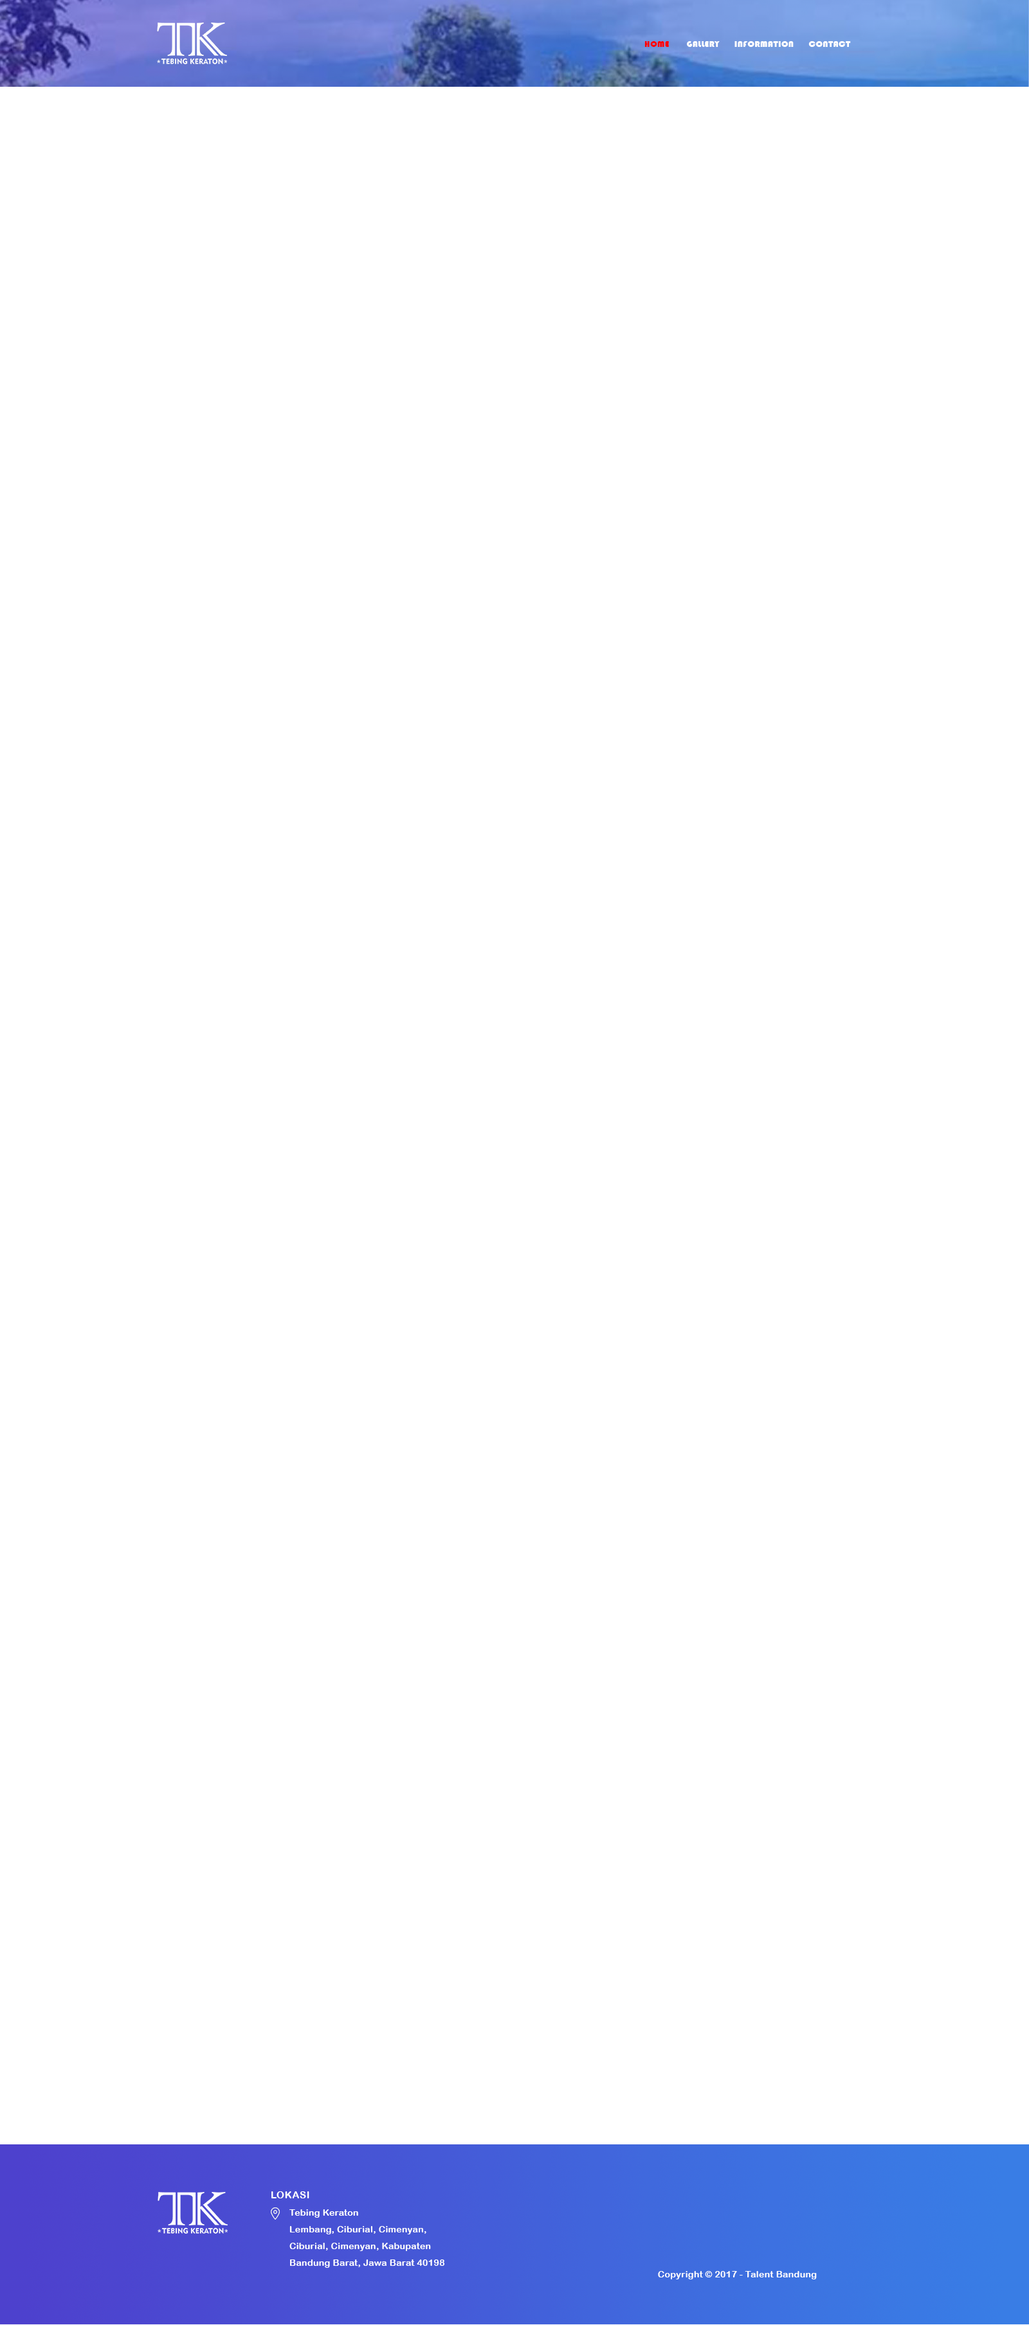
<style>
.page{position:relative;width:1029px;height:2325px;background:#ffffff}
.page>*{position:absolute;margin:0}
.t1{font:9px "Bauhaus93";letter-spacing:0.025em;color:#ffffff}
.t2{font:9px "Bauhaus93";letter-spacing:0.025em;color:#ff0000}
.t3{font:9.6px "ArialRoundedMTBold";letter-spacing:0.05em;color:#ffffff}
.t4{font:9px/16.7px "ArialRoundedMTBold";letter-spacing:0.025em;color:#ffffff}
.t5{font:9px "ArialRoundedMTBold";letter-spacing:0.025em;color:#ffffff}
</style>
<div class="page">
<p class="t1" style="left:644px;top:41px;width:207px;height:6px"><span class="t2">HOME</span>       GALLERY      INFORMATION      CONTACT</p>
<p class="t3" style="left:271px;top:2192px;width:38px;height:7px">LOKASI</p>
<p class="t4" style="left:289px;top:2210px;width:155px;height:58px">Tebing Keraton<br>Lembang, Ciburial, Cimenyan, Ciburial, Cimenyan, Kabupaten Bandung Barat, Jawa Barat 40198</p>
<p class="t5" style="left:658px;top:2271px;width:158px;height:9px">Copyright © 2017 - Talent Bandung</p>
</div>
